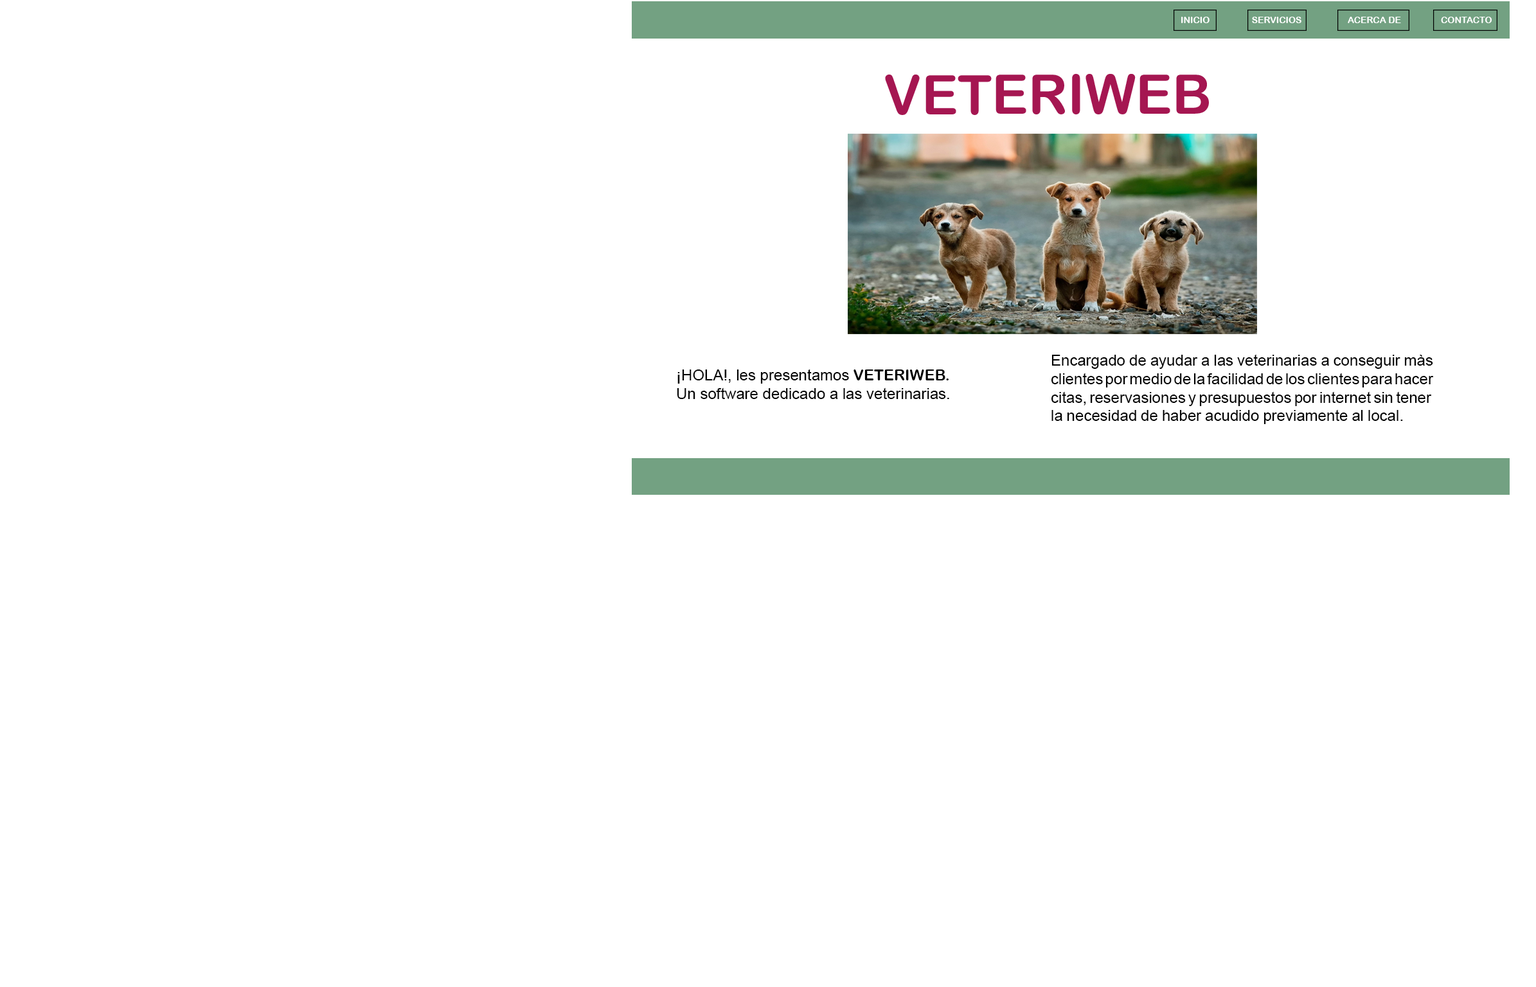
<style>
.page{position:relative;width:1536px;height:987px;background:#ffffff}
.page>*{position:absolute;margin:0}
.t1{font:9px "ArialRoundedMTBold";color:#ffffff}
.t2{font:15.4px "ArialMT";color:#000000}
.t3{font:15.4px "ArialRoundedMTBold";color:#000000}
</style>
<div class="page">
<p class="t1" style="left:1182px;top:17px;width:28px;height:6px">INICIO</p>
<p class="t1" style="left:1252px;top:17px;width:50px;height:6px">SERVICIOS</p>
<p class="t1" style="left:1348px;top:17px;width:53px;height:6px">ACERCA DE</p>
<p class="t1" style="left:1441px;top:17px;width:51px;height:6px">CONTACTO</p>
<p class="t2" style="left:1051px;top:354px;width:383px;height:70px">Encargado de ayudar a las veterinarias a conseguir màs <br>clientes por medio de la facilidad de los clientes para hacer <br>citas, reservasiones y presupuestos por internet sin tener <br>la necesidad de haber acudido previamente al local.</p>
<p class="t2" style="left:677px;top:369px;width:273px;height:30px">¡HOLA!, les presentamos<span class="t3"> VETERIWEB. <br></span>Un software dedicado a las veterinarias.</p>
</div>
